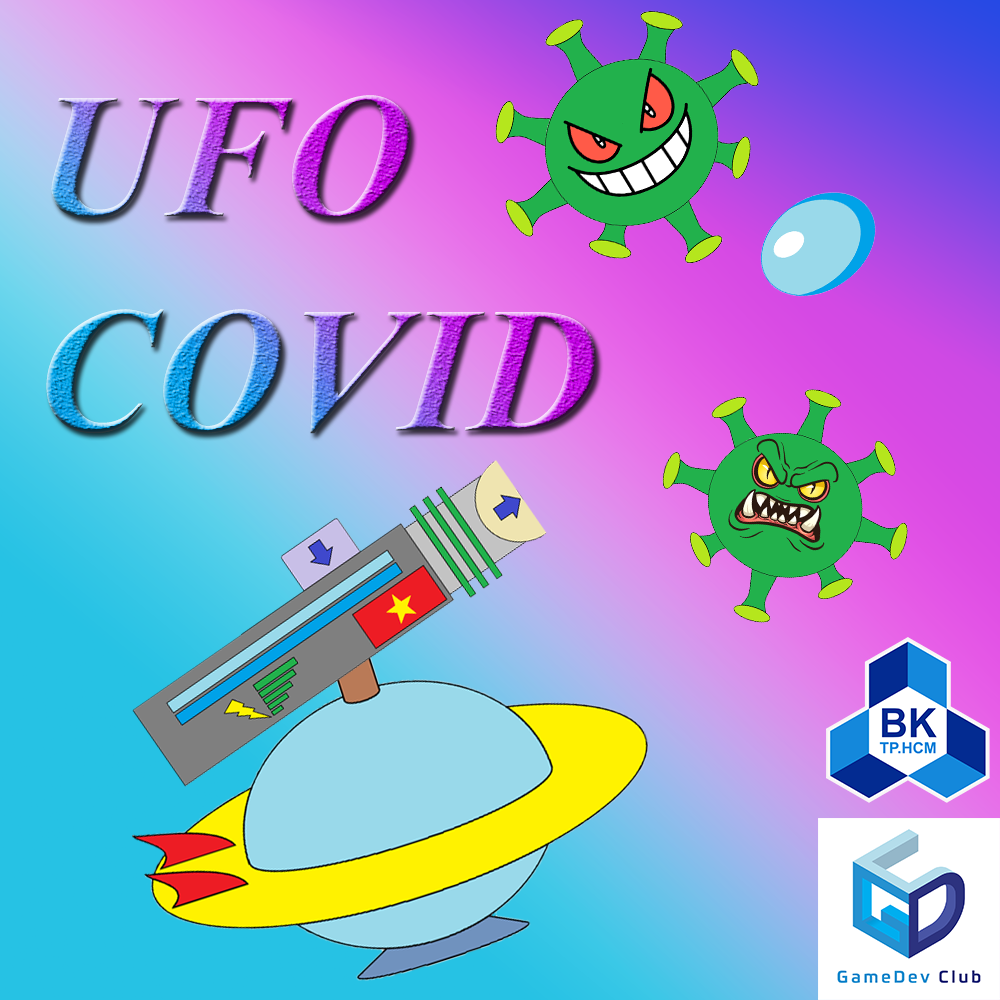
<style>
.page{position:relative;width:1000px;height:1000px}
.page>*{position:absolute;margin:0}
.t1{font:178.4px "TimesNewRomanPS-BoldItalicMT"}
</style>
<div class="page">
<p class="t1" style="left:46px;top:95px;width:551px;height:339px;text-align:right">UFO<br>COVID</p>
</div>
